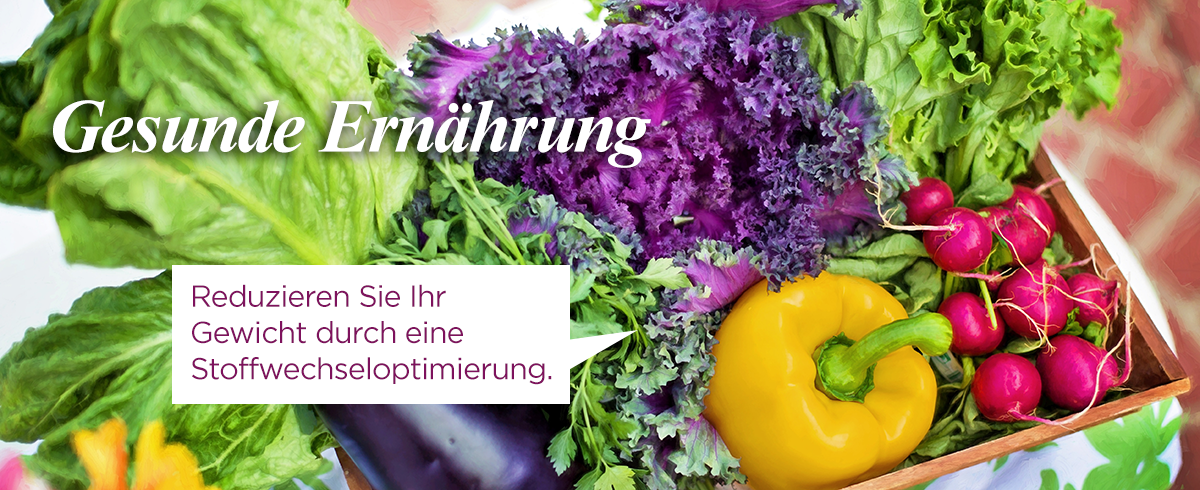
<style>
.page{position:relative;width:1200px;height:490px}
.page>*{position:absolute;margin:0}
.t1{font:76px "TimesNewRomanPS-BoldItalicMT";letter-spacing:-0.025em;color:#ffffff}
.t2{font:30.2px "Gotham-Book";letter-spacing:-0.025em;color:#7e125d}
</style>
<div class="page">
<p class="t1" style="left:53px;top:100px;width:598px;height:68px">Gesunde Ernährung</p>
<p class="t2" style="left:192px;top:284px;width:360px;height:101px">Reduzieren Sie Ihr <br>Gewicht durch eine <br>Stoffwechseloptimierung.</p>
</div>
